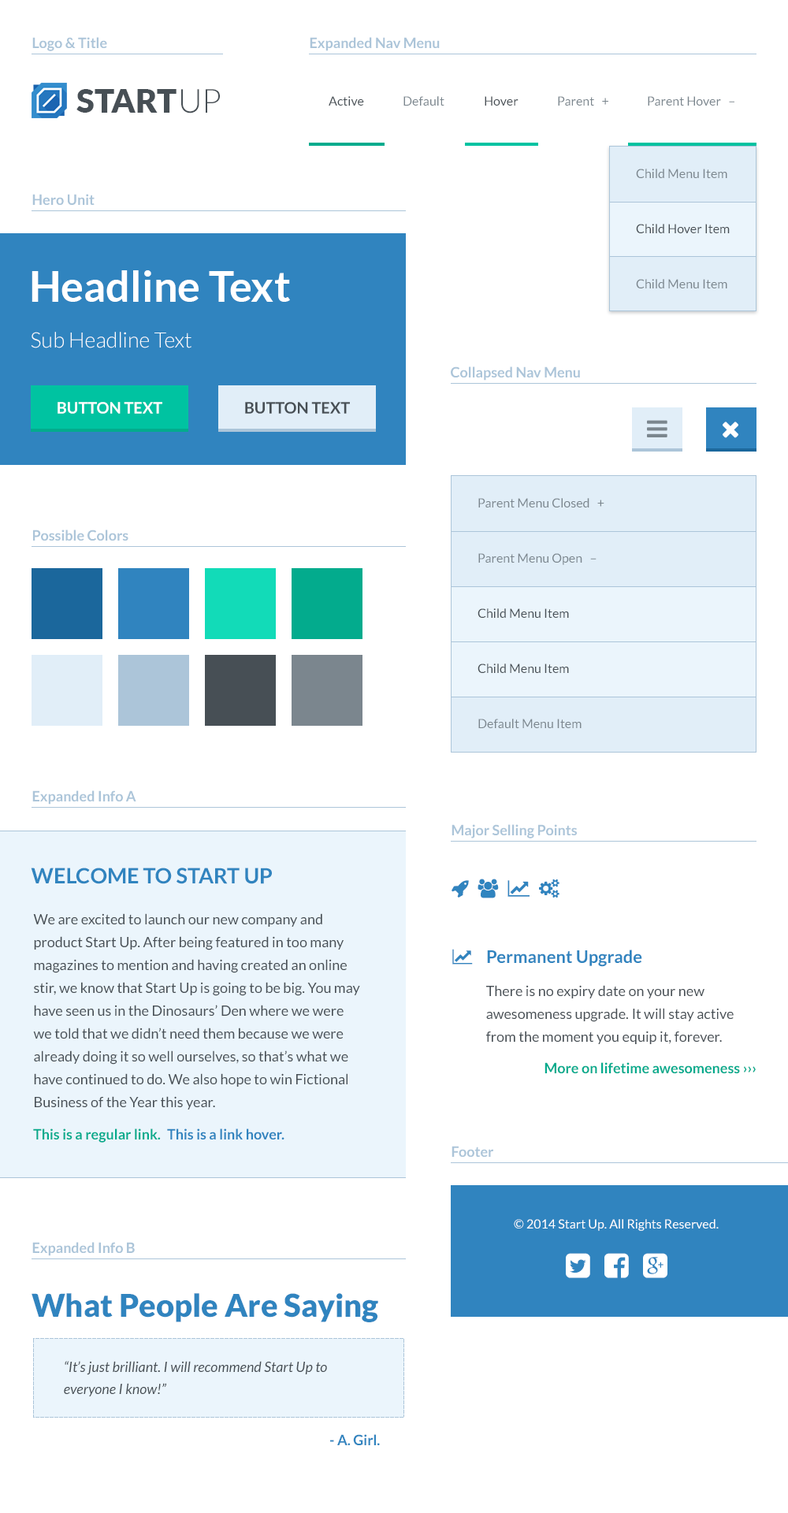
<style>
.page{position:relative;width:788px;height:1513px;background:#ffffff}
.page>*{position:absolute;margin:0}
.t1{font:14.2px "Lato-Bold";color:#acc5d9}
.t2{font:33.1px "Lato-Black";color:#474f55}
.t3{font:33.1px "Lato-Light";color:#474f55}
.t4{font:12.6px "Lato-Regular";color:#474f55}
.t5{font:12.6px "Lato-Regular";color:#7b868e}
.t6{font:42.6px "Lato-Bold";color:#ffffff}
.t7{font:21.3px "Lato-Light";color:#ffffff}
.t8{font:15.8px "Lato-Bold";color:#ffffff;text-transform:uppercase}
.t9{font:15.8px "Lato-Bold";color:#474f55;text-transform:uppercase}
.t10{font:21.3px "Lato-Bold";color:#3084bf;text-transform:uppercase}
.t11{font:14.2px/22.9px "Lato-Regular";color:#474f55}
.t12{font:17.3px "Lato-Bold";color:#3084bf}
.t13{font:14.2px "Lato-Bold";color:#03ab8d}
.t14{font:14.2px "Lato-Bold";color:#3084bf}
.t15{font:12.6px "Lato-Regular";color:#ffffff}
.t16{font:31.5px "Lato-Black";color:#3084bf}
.t17{font:14.2px/22.1px "Lato-Italic";color:#474f55}
</style>
<div class="page">
<p class="t1" style="left:32px;top:37px;width:75px;height:14px">Logo &amp; Title</p>
<p class="t1" style="left:310px;top:37px;width:130px;height:14px">Expanded Nav Menu</p>
<p class="t2" style="left:76px;top:89px;width:101px;height:24px">START</p>
<p class="t3" style="left:181px;top:89px;width:39px;height:24px">UP</p>
<p class="t4" style="left:329px;top:96px;width:35px;height:10px">Active</p>
<p class="t5" style="left:403px;top:96px;width:41px;height:10px">Default</p>
<p class="t4" style="left:485px;top:96px;width:34px;height:10px">Hover</p>
<p class="t5" style="left:558px;top:96px;width:50px;height:10px">Parent   +</p>
<p class="t5" style="left:648px;top:96px;width:86px;height:10px">Parent Hover   –</p>
<p class="t5" style="left:636px;top:169px;width:91px;height:10px">Child Menu Item</p>
<p class="t1" style="left:32px;top:194px;width:63px;height:11px">Hero Unit</p>
<p class="t4" style="left:636px;top:224px;width:94px;height:10px">Child Hover Item</p>
<p class="t6" style="left:32px;top:270px;width:258px;height:32px">Headline Text</p>
<p class="t5" style="left:636px;top:279px;width:91px;height:10px">Child Menu Item</p>
<p class="t7" style="left:31px;top:332px;width:161px;height:16px">Sub Headline Text</p>
<p class="t1" style="left:451px;top:366px;width:129px;height:15px">Collapsed Nav Menu</p>
<p class="t8" style="left:58px;top:402px;width:104px;height:12px">Button Text</p>
<p class="t9" style="left:245px;top:402px;width:105px;height:12px">Button Text</p>
<p class="t5" style="left:478px;top:498px;width:126px;height:10px">Parent Menu Closed   +</p>
<p class="t1" style="left:33px;top:530px;width:95px;height:11px">Possible Colors</p>
<p class="t5" style="left:478px;top:553px;width:119px;height:12px">Parent Menu Open   –</p>
<p class="t4" style="left:478px;top:608px;width:91px;height:11px">Child Menu Item</p>
<p class="t4" style="left:478px;top:664px;width:91px;height:10px">Child Menu Item</p>
<p class="t5" style="left:478px;top:719px;width:104px;height:10px">Default Menu Item</p>
<p class="t1" style="left:32px;top:790px;width:104px;height:15px">Expanded Info A</p>
<p class="t1" style="left:452px;top:824px;width:125px;height:15px">Major Selling Points</p>
<p class="t10" style="left:31px;top:868px;width:241px;height:16px">Welcome to Start Up</p>
<p class="t11" style="left:33px;top:913px;width:327px;height:197px">We are excited to launch our new company and product Start Up. After being featured in too many magazines to mention and having created an online stir, we know that Start Up is going to be big. You may have seen us in the Dinosaurs’ Den where we were we told that we didn’t need them because we were already doing it so well ourselves, so that’s what we have continued to do. We also hope to win Fictional Business of the Year this year.</p>
<p class="t12" style="left:487px;top:950px;width:155px;height:17px">Permanent Upgrade</p>
<p class="t11" style="left:486px;top:985px;width:248px;height:59px">There is no expiry date on your new awesomeness upgrade. It will stay active from the moment you equip it, forever.</p>
<p class="t13" style="left:545px;top:1062px;width:211px;height:11px">More on lifetime awesomeness ›››</p>
<p class="t13" style="left:33px;top:1129px;width:128px;height:14px">This is a regular link.</p>
<p class="t14" style="left:167px;top:1129px;width:117px;height:11px">This is a link hover.</p>
<p class="t1" style="left:452px;top:1146px;width:41px;height:11px">Footer</p>
<p class="t15" style="left:514px;top:1219px;width:205px;height:12px">© 2014 Start Up. All Rights Reserved.</p>
<p class="t1" style="left:32px;top:1242px;width:103px;height:14px">Expanded Info B</p>
<p class="t16" style="left:32px;top:1293px;width:346px;height:29px">What People Are Saying</p>
<p class="t17" style="left:64px;top:1361px;width:263px;height:35px">“It’s just brilliant. I will recommend Start Up to everyone I know!”</p>
<p class="t14" style="left:330px;top:1434px;width:50px;height:11px">- A. Girl.</p>
</div>
